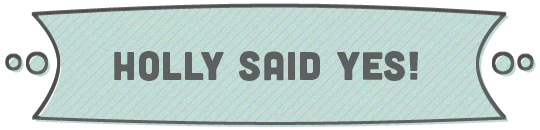
<style>
.page{position:relative;width:540px;height:130px;background:#ffffff}
.page>*{position:absolute;margin:0}
.t1{font:40px "Cubano-Regular";letter-spacing:0.025em;color:#5c6160}
</style>
<div class="page">
<p class="t1" style="left:114px;top:51px;width:304px;height:30px">HOLLY SAID YES!</p>
</div>
